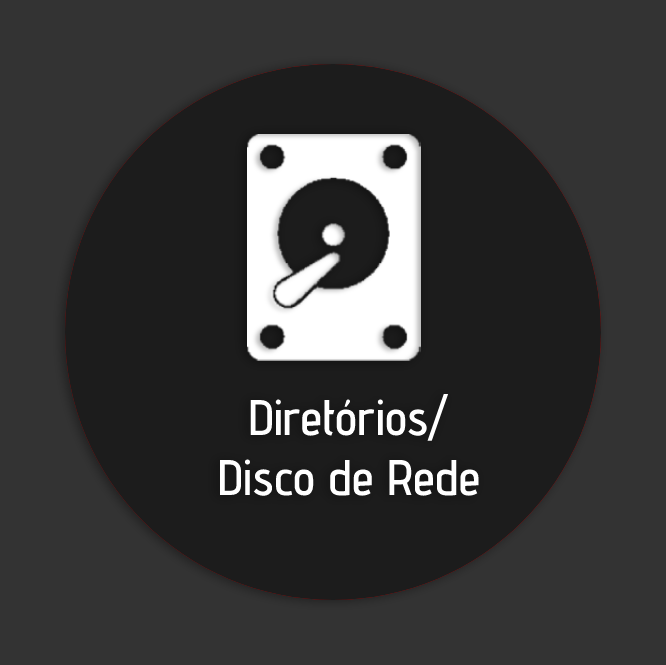
<style>
.page{position:relative;width:666px;height:665px;background:#333333}
.page>*{position:absolute;margin:0}
.t1{font:50px "AdventPro-SemiBold";color:#ffffff}
</style>
<div class="page">
<p class="t1" style="left:219px;top:394px;width:260px;height:102px;text-align:center">Diretórios/<br>Disco de Rede</p>
</div>
